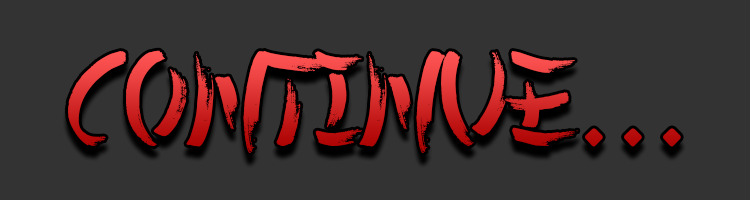
<style>
.page{position:relative;width:750px;height:200px;background:#333333}
.page>*{position:absolute;margin:0}
.t1{font:134.7px "ChineseTakeaway";scale:1.07 1}
</style>
<div class="page">
<p class="t1" style="left:68px;top:50px;width:613px;height:103px">Continue...</p>
</div>
